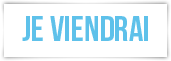
<style>
.page{position:relative;width:171px;height:61px;background:#ffffff}
.page>*{position:absolute;margin:0}
.t1{font:36px "BebasNeue";color:#5ec1ea}
</style>
<div class="page">
<p class="t1" style="left:22px;top:16px;width:126px;height:25px">JE VIENDRAI</p>
</div>
